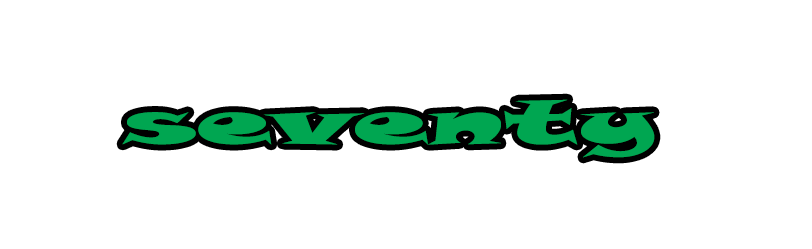
<style>
.page{position:relative;width:812px;height:249px;background:#ffffff}
.page>*{position:absolute;margin:0}
.t1{font:60px "SnapITC-Regular";color:#00a651;scale:2 1}
</style>
<div class="page">
<p class="t1" style="left:122px;top:99px;width:533px;height:59px">seventy</p>
</div>
